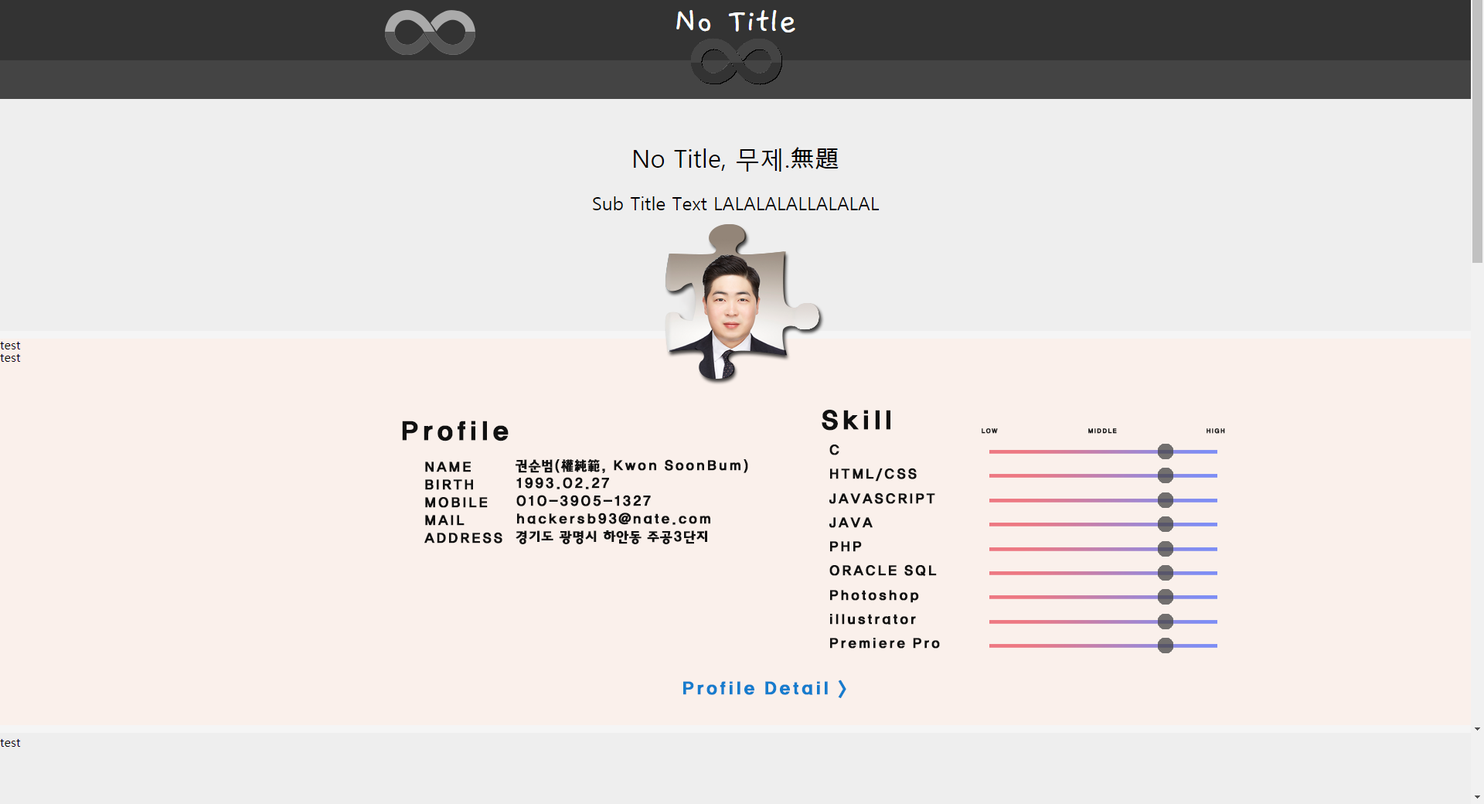
<style>
.page{position:relative;width:1484px;height:804px;background:#faf0eb}
.page>*{position:absolute;margin:0}
.t1{font:26.3px "HaanYGodic25";color:#111111;font-weight:bold}
.t2{font:6.2px "HaanYGodic25";color:#111111;font-weight:bold}
.t3{font:13.9px/24.2px "HaanYGodic25";color:#111111;font-weight:bold}
.t4{font:13.9px/17.8px "HaanYGodic25";color:#111111;font-weight:bold}
.t5{font:17.8px "HaanYGodic25";color:#167ccd;font-weight:bold}
</style>
<div class="page">
<p class="t1" style="left:821px;top:410px;width:69px;height:20px">Skill</p>
<p class="t1" style="left:402px;top:420px;width:106px;height:21px">Profile</p>
<p class="t2" style="left:981px;top:428px;width:17px;height:6px">LOW</p>
<p class="t2" style="left:1088px;top:428px;width:29px;height:6px">MIDDLE</p>
<p class="t2" style="left:1206px;top:428px;width:19px;height:6px">HIGH</p>
<p class="t3" style="left:829px;top:444px;width:111px;height:204px">C<br>HTML/CSS<br>JAVASCRIPT<br>JAVA<br>PHP<br>ORACLE SQL<br>Photoshop<br>illustrator<br>Premiere Pro</p>
<p class="t4" style="left:424px;top:461px;width:78px;height:82px">NAME       <br>BIRTH<br>MOBILE<br>MAIL<br>ADDRESS</p>
<p class="t4" style="left:515px;top:459px;width:233px;height:85px">권순범(權純範, Kwon SoonBum)<br>1993.02.27<br>010-3905-1327<br>hackersb93@nate.com<br>경기도 광명시 하안동 주공3단지</p>
<p class="t5" style="left:683px;top:679px;width:163px;height:19px">Profile Detail &gt;</p>
</div>
